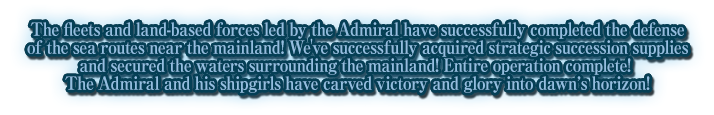
<style>
.page{position:relative;width:714px;height:115px;background:#053f55}
.page>*{position:absolute;margin:0}
.t1{font:18px/18px "RyuminPro-ExBold";letter-spacing:-0.04em;color:#93bee0;scale:0.9 1}
</style>
<div class="page">
<p class="t1" style="left:27px;top:22px;width:661px;height:71px;text-align:center">The fleets and land-based forces led by the Admiral have successfully completed the defense<br>of the sea routes near the mainland! We've successfully acquired strategic succession supplies<br>and secured the waters surrounding the mainland! Entire operation complete! <br>The Admiral and his shipgirls have carved victory and glory into dawn’s horizon!</p>
</div>
